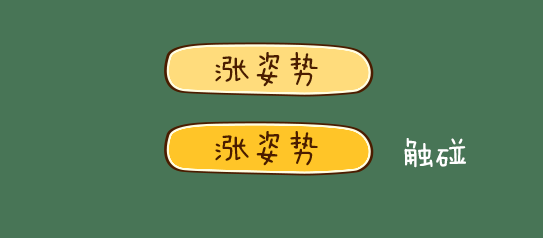
<style>
.page{position:relative;width:543px;height:238px;background:#487556}
.page>*{position:absolute;margin:0}
.t1{font:36px "FZMWJW--GB1-0";color:#4b1c00}
.t2{font:32.7px "FZMWJW--GB1-0";color:#ffffff}
</style>
<div class="page">
<p class="t1" style="left:215px;top:52px;width:103px;height:35px">涨姿势</p>
<p class="t1" style="left:215px;top:131px;width:103px;height:35px">涨姿势</p>
<p class="t2" style="left:404px;top:138px;width:62px;height:30px">触碰</p>
</div>
